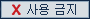
<style>
.page{position:relative;width:90px;height:19px;background:#d8dee3}
.page>*{position:absolute;margin:0}
.t1{font:15px "YetR-HM";color:#c81d23}
.t2{font:12px "Gulim";color:#193150}
</style>
<div class="page">
<p class="t1" style="left:11px;top:4px;width:10px;height:11px">X</p>
<p class="t2" style="left:27px;top:4px;width:49px;height:11px">사용 금지</p>
</div>
